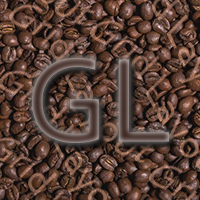
<style>
.page{position:relative;width:200px;height:200px}
.page>*{position:absolute;margin:0}
.t1{font:125px "Corbel"}
</style>
<div class="page">
<p class="t1" style="left:32px;top:58px;width:137px;height:85px">GL</p>
</div>
